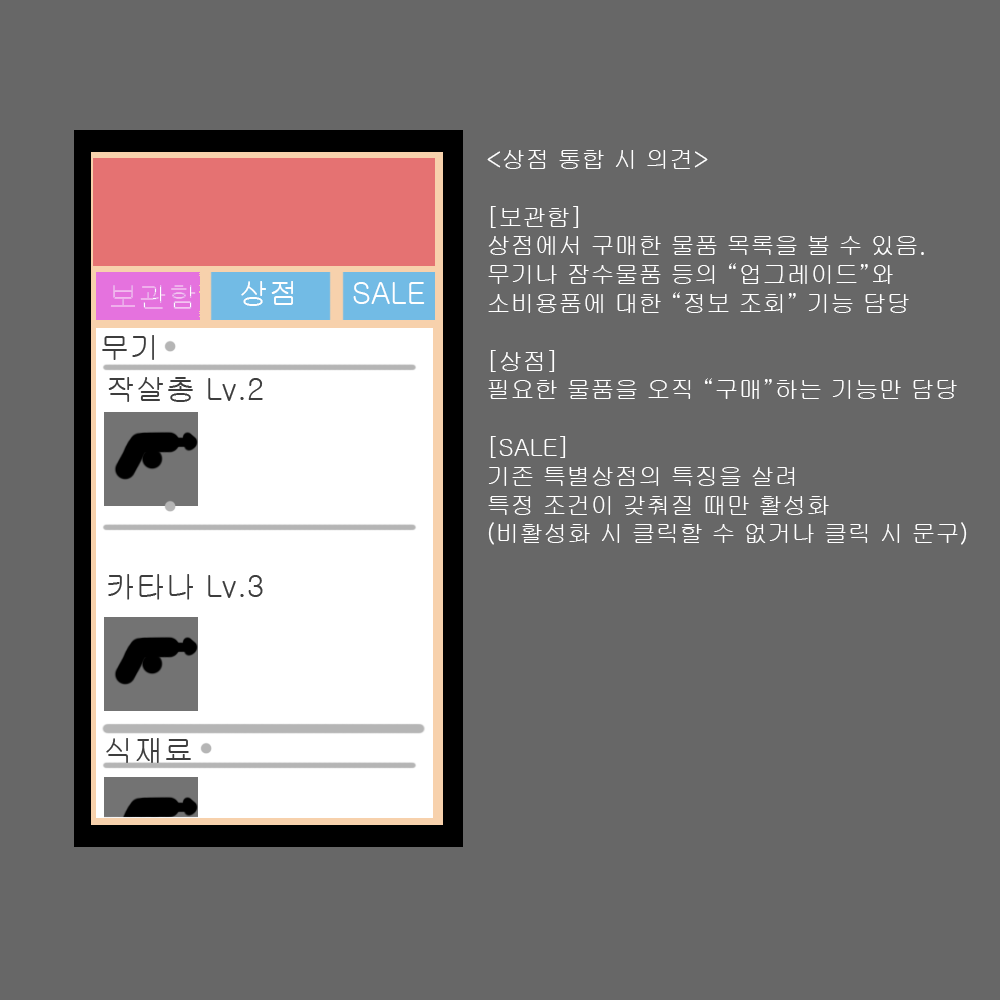
<style>
.page{position:relative;width:1000px;height:1000px;background:#676767}
.page>*{position:absolute;margin:0}
.t1{font:24px "Gulim";color:#ffffff}
</style>
<div class="page">
<p class="t1" style="left:487px;top:150px;width:480px;height:395px">&lt;상점 통합 시 의견&gt;<br><br>[보관함]<br>상점에서 구매한 물품 목록을 볼 수 있음.<br>무기나 잠수물품 등의 “업그레이드”와<br>소비용품에 대한 “정보 조회” 기능 담당<br><br>[상점]<br>필요한 물품을 오직 “구매”하는 기능만 담당<br><br>[SALE]<br>기존 특별상점의 특징을 살려<br>특정 조건이 갖춰질 때만 활성화<br>(비활성화 시 클릭할 수 없거나 클릭 시 문구)</p>
</div>
